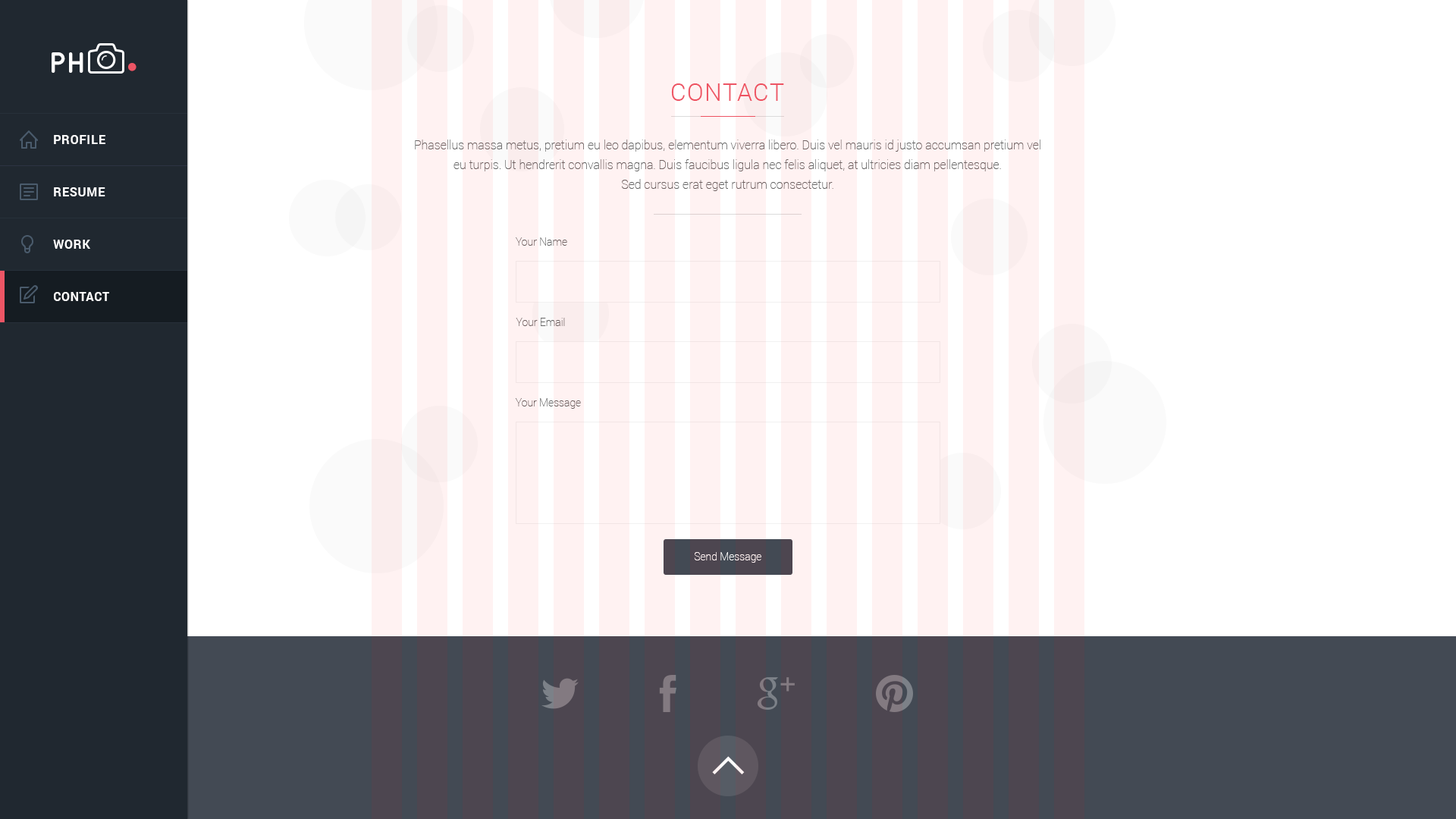
<style>
.page{position:relative;width:1456px;height:819px;background:#fff2f2}
.page>*{position:absolute;margin:0}
.t1{font:29.2px "QuicksandBold-Regular";color:#ffffff}
.t2{font:53.9px "QuicksandBold-Regular";color:#ed5565}
.t3{font:24.3px "Roboto-Light";letter-spacing:0.05em;color:#ed5565;text-transform:uppercase}
.t4{font:12.1px/17.4px "Roboto-Bold";letter-spacing:0.05em;color:#ffffff;text-transform:uppercase}
.t5{font:12.1px/19.7px "Roboto-Thin";color:#666666}
.t6{font:10.6px "Roboto-Thin";color:#666666}
.t7{font:10.6px "Roboto-Thin";color:#ffffff}
</style>
<div class="page">
<p class="t1" style="left:52px;top:52px;width:31px;height:21px">PH</p>
<p class="t2" style="left:128px;top:63px;width:8px;height:8px">.</p>
<p class="t3" style="left:671px;top:83px;width:113px;height:18px">Contact</p>
<p class="t4" style="left:53px;top:135px;width:56px;height:166px">Profile<br><br><br>Resume<br><br><br>work<br><br><br>contact</p>
<p class="t5" style="left:415px;top:140px;width:625px;height:51px;text-align:center">Phasellus massa metus, pretium eu leo dapibus, elementum viverra libero. Duis vel mauris id justo accumsan pretium vel eu turpis. Ut hendrerit convallis magna. Duis faucibus ligula nec felis aliquet, at ultricies diam pellentesque.<br>Sed cursus erat eget rutrum consectetur.</p>
<p class="t6" style="left:516px;top:237px;width:51px;height:9px">Your Name</p>
<p class="t6" style="left:516px;top:318px;width:49px;height:8px">Your Email</p>
<p class="t6" style="left:515px;top:398px;width:66px;height:11px">Your Message</p>
<p class="t7" style="left:694px;top:552px;width:67px;height:11px">Send Message</p>
</div>
